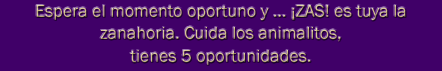
<style>
.page{position:relative;width:442px;height:71px;background:#400068}
.page>*{position:absolute;margin:0}
.t1{font:18px/22.2px "FranklinGothic-Book";color:#d4c088}
</style>
<div class="page">
<p class="t1" style="left:36px;top:4px;width:370px;height:61px;text-align:center">Espera el momento oportuno y ... ¡ZAS! es tuya la <br>zanahoria. Cuida los animalitos, <br>tienes 5 oportunidades.</p>
</div>
